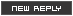
<style>
.page{position:relative;width:73px;height:16px;background:#373636}
.page>*{position:absolute;margin:0}
.t1{font:8px "BitDustTwo";color:#ffffff;text-transform:uppercase}
</style>
<div class="page">
<p class="t1" style="left:12px;top:6px;width:49px;height:5px">NEW REPLY</p>
</div>
